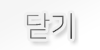
<style>
.page{position:relative;width:100px;height:50px}
.page>*{position:absolute;margin:0}
.t1{font:28px "NanumSquareL"}
</style>
<div class="page">
<p class="t1" style="left:26px;top:13px;width:46px;height:26px">닫기</p>
</div>
